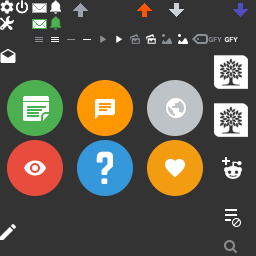
<style>
.page{position:relative;width:256px;height:256px;background:#333333}
.page>*{position:absolute;margin:0}
.t1{font:7px "Roboto-Bold";color:#8a8e95}
.t2{font:7px "Roboto-Bold";color:#ffffff}
.t3{font:40px "Norwester-Regular";color:#ffffff}
</style>
<div class="page">
<p class="t1" style="left:208px;top:37px;width:14px;height:5px">GFY</p>
<p class="t2" style="left:224px;top:37px;width:14px;height:5px">GFY</p>
<p class="t3" style="left:96px;top:151px;width:17px;height:33px">?</p>
</div>
